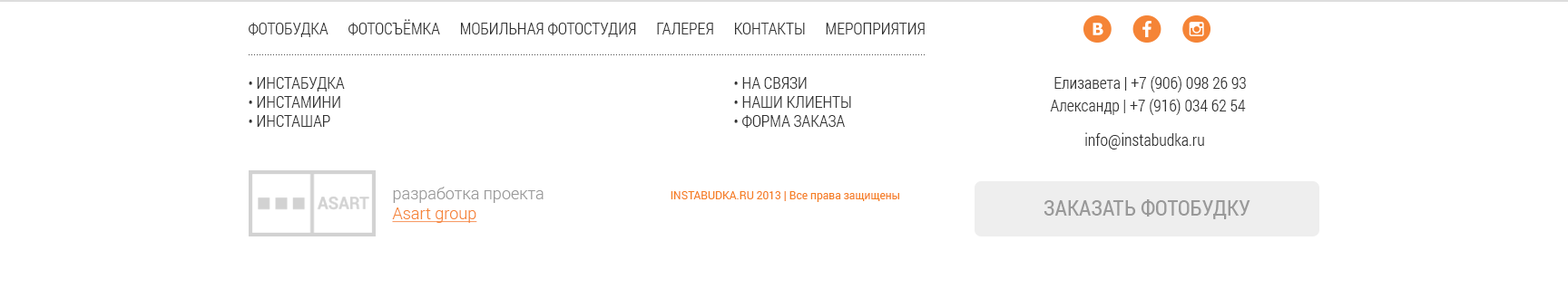
<style>
.page{position:relative;width:1568px;height:289px;background:#ffffff}
.page>*{position:absolute;margin:0}
.t1{font:16.3px "RobotoCondensed-Light";color:#333333;text-transform:uppercase}
.t2{font:16.3px/19.1px "RobotoCondensed-Light";color:#333333;text-transform:uppercase}
.t3{font:16.3px/22.6px "RobotoCondensed-Light";color:#333333}
.t4{font:16.3px "RobotoCondensed-Light";color:#333333}
.t5{font:16.3px "Roboto-Light";color:#999999}
.t6{font:16.3px "Roboto-Light";color:#f58436;text-decoration:underline}
.t7{font:10.9px "Roboto-Regular";color:#f58026}
.t8{font:21.8px "RobotoCondensed-Regular";color:#999999;text-transform:uppercase}
</style>
<div class="page">
<p class="t1" style="left:249px;top:19px;width:676px;height:18px">фотобудка фотосъёмка мобильная фотостудия галерея контакты мероприятия</p>
<p class="t2" style="left:249px;top:77px;width:96px;height:50px">• инстабудка<br>• инстамини<br>• инсташар</p>
<p class="t2" style="left:734px;top:77px;width:117px;height:51px">• на связи<br>• наши клиенты<br>• форма заказа</p>
<p class="t3" style="left:1050px;top:76px;width:196px;height:39px">Елизавета | +7 (906) 098 26 93<br>Александр | +7 (916) 034 62 54</p>
<p class="t4" style="left:1085px;top:132px;width:119px;height:18px">info@instabudka.ru</p>
<p class="t5" style="left:392px;top:187px;width:152px;height:36px">разработка проекта<br><span class="t6">Asart group</span></p>
<p class="t7" style="left:671px;top:191px;width:228px;height:11px">INSTABUDKA.RU 2013 | Все права защищены</p>
<p class="t8" style="left:1044px;top:200px;width:206px;height:20px">заказать фотобудку</p>
</div>
